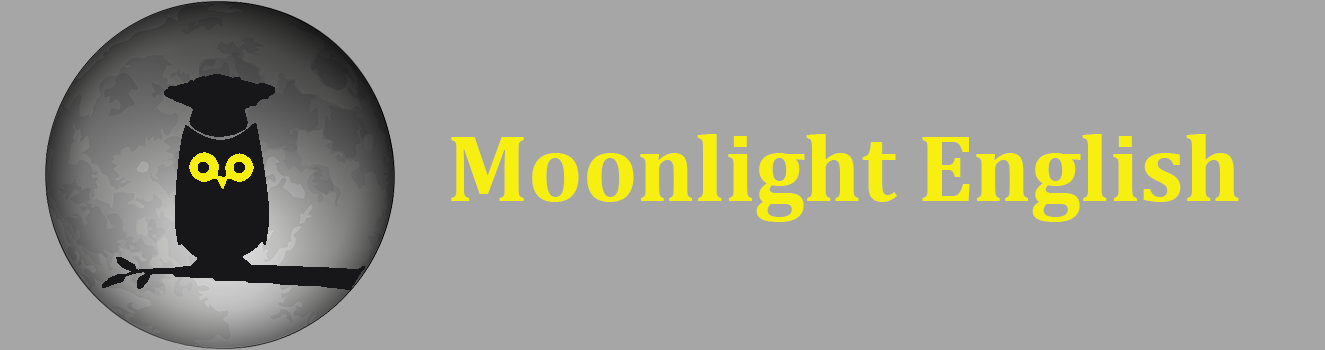
<style>
.page{position:relative;width:1325px;height:350px;background:#a6a6a6}
.page>*{position:absolute;margin:0}
.t1{font:96px "Cambria-Bold";color:#f7ef10}
</style>
<div class="page">
<p class="t1" style="left:451px;top:134px;width:788px;height:88px">Moonlight English</p>
</div>
